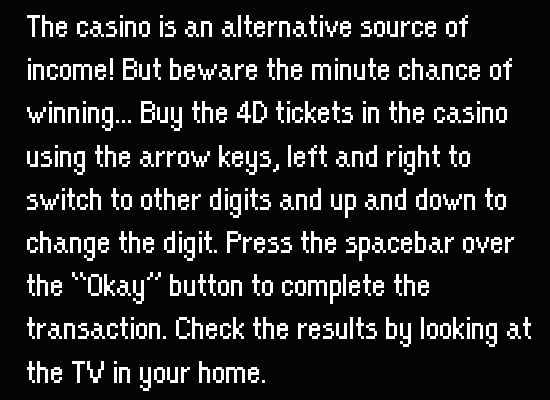
<style>
.page{position:relative;width:550px;height:400px;background:#040404}
.page>*{position:absolute;margin:0}
.t1{font:36px "OrangeKid-Regular";color:#ffffff}
</style>
<div class="page">
<p class="t1" style="left:27px;top:15px;width:504px;height:376px">The casino is an alternative source of<br>income! But beware the minute chance of <br>winning... Buy the 4D tickets in the casino<br>using the arrow keys, left and right to<br>switch to other digits and up and down to <br>change the digit. Press the spacebar over <br>the “Okay” button to complete the<br>transaction. Check the results by looking at<br>the TV in your home.</p>
</div>
